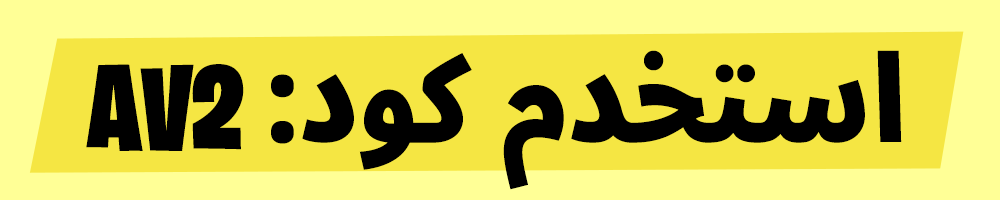
<style>
.page{position:relative;width:1000px;height:200px;background:#f5e643}
.page>*{position:absolute;margin:0}
.t1{font:120px "NotoSansArabic-CondensedBlack";color:#000000}
.t2{font:120px "BurbankBigCondensed-Black";color:#000000}
</style>
<div class="page">
<p class="t1" style="left:271px;top:50px;width:631px;height:140px">:استخدم كود</p>
<p class="t2" style="left:86px;top:64px;width:158px;height:87px">AV2</p>
</div>
